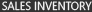
<style>
.page{position:relative;width:92px;height:12px;background:#333333}
.page>*{position:absolute;margin:0}
.t1{font:11.4px "SegoeUI";color:#f4f4f4;scale:0.96 1}
</style>
<div class="page">
<p class="t1" style="left:2px;top:1px;width:90px;height:10px">SALES INVENTORY</p>
</div>
